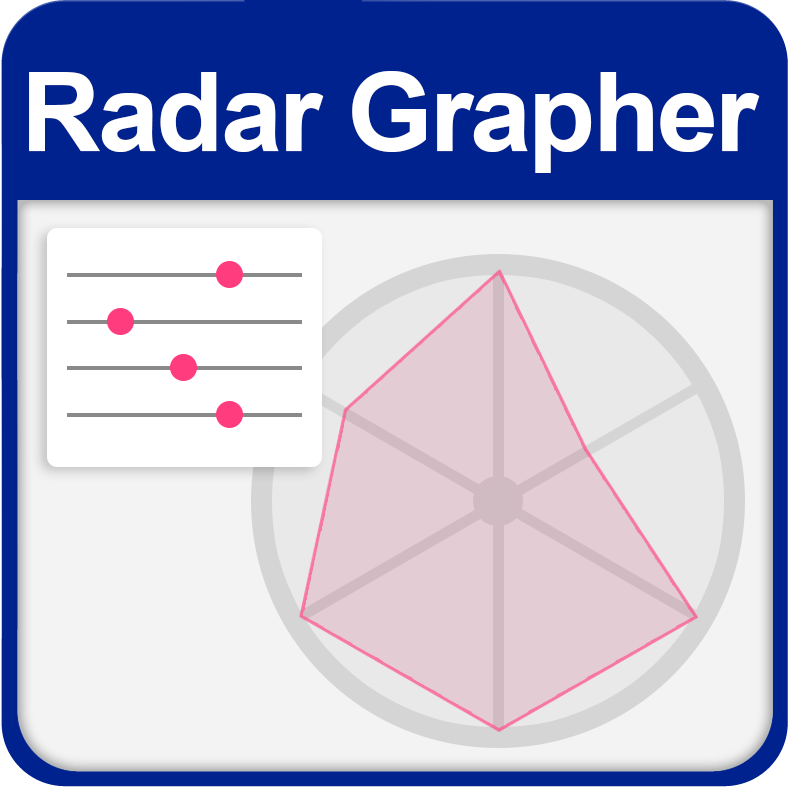
<style>
.page{position:relative;width:788px;height:788px;background:#00228f}
.page>*{position:absolute;margin:0}
.t1{font:110px "Arial-BoldMT";letter-spacing:-0.025em;color:#ffffff}
</style>
<div class="page">
<p class="t1" style="left:29px;top:71px;width:731px;height:102px">Radar Grapher</p>
</div>
